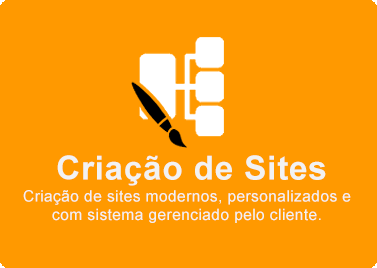
<style>
.page{position:relative;width:377px;height:268px;background:#ff9900}
.page>*{position:absolute;margin:0}
.t1{font:33.2px "Arial-BoldMT";letter-spacing:0.025em;color:#f2f2f2}
.t2{font:15.6px "ArialMT";letter-spacing:0.025em;color:#f2f2f2}
</style>
<div class="page">
<p class="t1" style="left:57px;top:155px;width:269px;height:31px">Criação de Sites</p>
<p class="t2" style="left:23px;top:190px;width:328px;height:33px;text-align:center">Criação de sites modernos, personalizados e com sistema gerenciado pelo cliente.</p>
</div>
